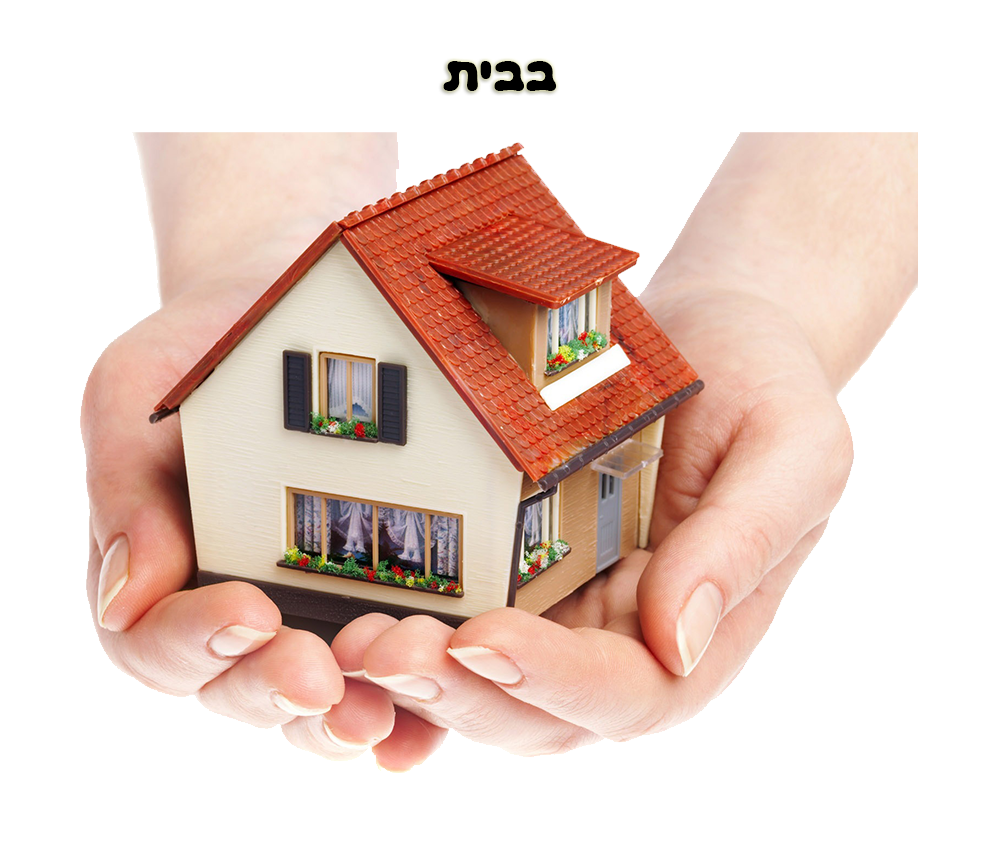
<style>
.page{position:relative;width:1000px;height:841px;background:#ffffff}
.page>*{position:absolute;margin:0}
.t1{font:48.2px "GanCLM-Bold";color:#000000}
</style>
<div class="page">
<p class="t1" style="left:443px;top:61px;width:114px;height:30px">תיבב</p>
</div>
